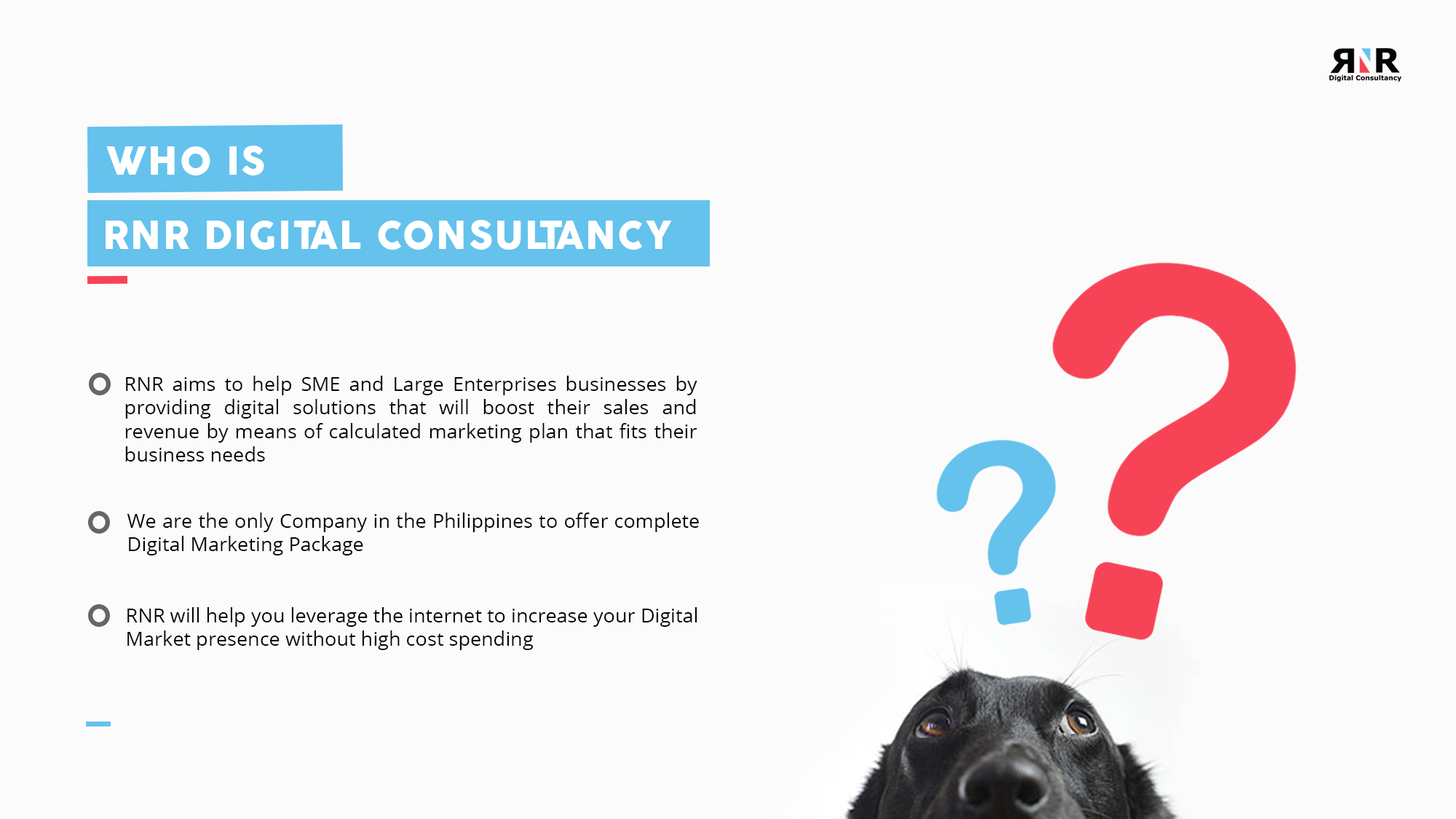
<style>
.page{position:relative;width:1456px;height:819px;background:#fbfbfb}
.page>*{position:absolute;margin:0}
.t1{font:37.7px "CocoGothic-Heavy";letter-spacing:0.04em;color:#ffffff;text-transform:uppercase}
.t2{font:19.7px "OpenSans";color:#050505}
</style>
<div class="page">
<p class="t1" style="left:106px;top:146px;width:158px;height:29px">Who is</p>
<p class="t1" style="left:106px;top:220px;width:565px;height:30px">rnr digital consultancy</p>
<p class="t2" style="left:125px;top:376px;width:572px;height:86px;text-align:justify">RNR aims to help SME and Large Enterprises businesses by providing digital solutions that will boost their sales and revenue by means of calculated marketing plan that fits their business needs</p>
<p class="t2" style="left:127px;top:513px;width:572px;height:42px;text-align:justify">We are the only Company in the Philippines to offer complete Digital Marketing Package</p>
<p class="t2" style="left:127px;top:607px;width:570px;height:43px;text-align:justify">RNR will help you leverage the internet to increase your Digital Market presence without high cost spending</p>
</div>
